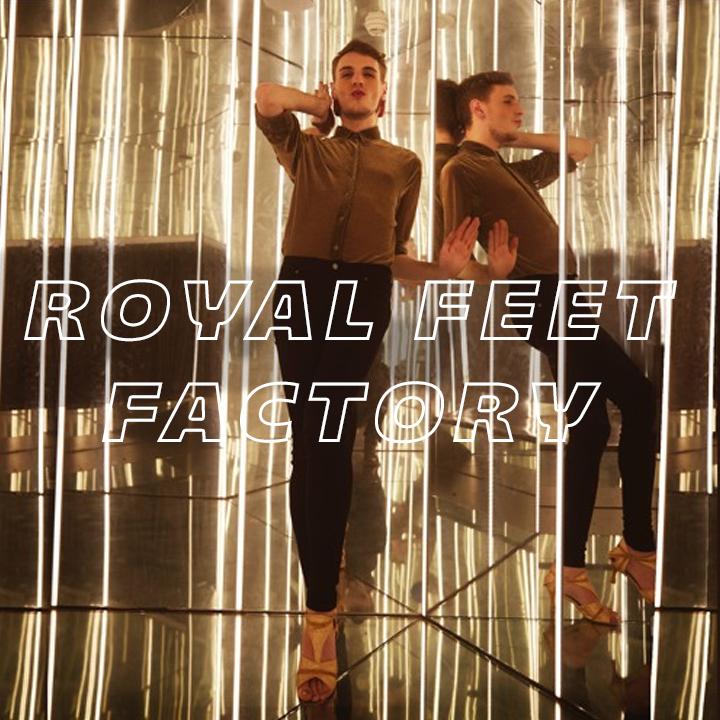
<style>
.page{position:relative;width:720px;height:720px}
.page>*{position:absolute;margin:0}
.t1{font:85px "Majoris-Italic";letter-spacing:0.1em;text-transform:uppercase}
</style>
<div class="page">
<p class="t1" style="left:24px;top:279px;width:653px;height:165px;text-align:center">royal feet<br>factory</p>
</div>
